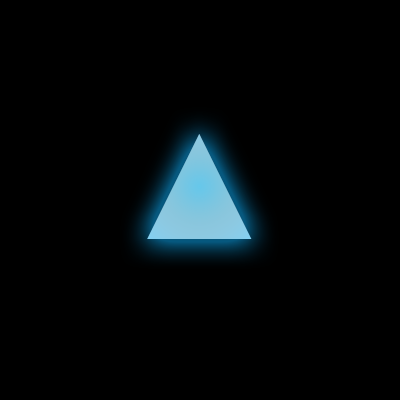
<style>
.page{position:relative;width:400px;height:400px;background:#000000}
.page>*{position:absolute;margin:0}
.t1{font:150px "TimesNewRomanPSMT";color:#80d1f5}
</style>
<div class="page">
<p class="t1" style="left:147px;top:134px;width:105px;height:105px">▲</p>
</div>
